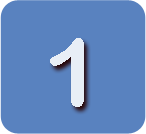
<style>
.page{position:relative;width:146px;height:134px;background:#5982bf}
.page>*{position:absolute;margin:0}
.t1{font:94.7px "ArialRoundedMTBold";letter-spacing:-0.01em;color:#e8eef6}
</style>
<div class="page">
<p class="t1" style="left:50px;top:38px;width:34px;height:69px">1</p>
</div>
